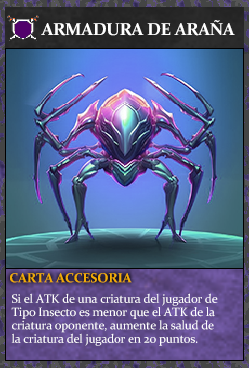
<style>
.page{position:relative;width:249px;height:368px}
.page>*{position:absolute;margin:0}
.t1{font:17.3px "Constantia-Bold";letter-spacing:-0.02em;color:#ffffff}
.t2{font:13.3px "Constantia-Bold";letter-spacing:-0.02em;color:#f2ac05}
.t3{font:12.3px/13.3px "Constantia";letter-spacing:-0.02em;color:#ffffff}
</style>
<div class="page">
<p class="t1" style="left:41px;top:20px;width:194px;height:16px">ARMADURA DE ARAÑA</p>
<p class="t2" style="left:10px;top:273px;width:122px;height:10px">CARTA ACCESORIA</p>
<p class="t3" style="left:11px;top:293px;width:207px;height:53px">Si el ATK de una criatura del jugador de<br>Tipo Insecto es menor que el ATK de la<br>criatura oponente, aumente la salud de<br>la criatura del jugador en 20 puntos.</p>
</div>
